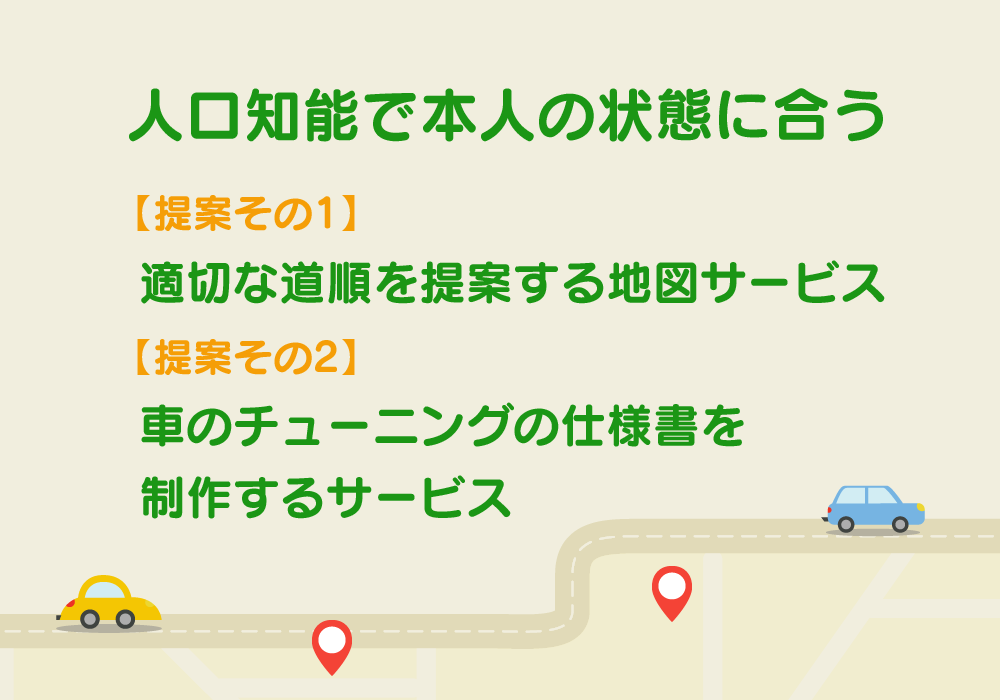
<style>
.page{position:relative;width:1000px;height:700px;background:#f1eede}
.page>*{position:absolute;margin:0}
.t1{font:58.7px "SeuratPro-B";color:#1b9615}
.t2{font:46.7px/71.8px "SeuratPro-B";color:#1b9615}
.t3{font:40px/71.8px "SeuratPro-B";color:#f59e07}
</style>
<div class="page">
<p class="t1" style="left:129px;top:88px;width:754px;height:54px">人口知能で本人の状態に合う</p>
<p class="t2" style="left:137px;top:195px;width:748px;height:324px"><span class="t3">【提案その1】<br></span>適切な道順を提案する地図サービス<br><span class="t3">【提案その2】<br></span>車のチューニングの仕様書を<br>制作するサービス</p>
</div>
